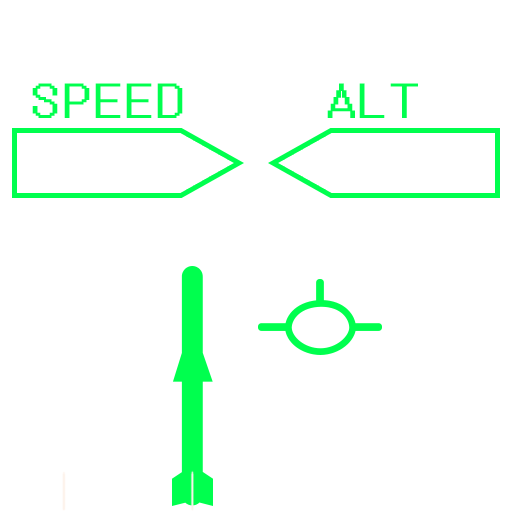
<style>
.page{position:relative;width:512px;height:512px;background:#ffffff}
.page>*{position:absolute;margin:0}
.t1{font:48px "FixedSys";letter-spacing:0.05em;color:#00ff4e;font-weight:bold;scale:1.25 1}
</style>
<div class="page">
<p class="t1" style="left:32px;top:83px;width:151px;height:35px">SPEED</p>
<p class="t1" style="left:327px;top:83px;width:91px;height:35px">ALT</p>
</div>
